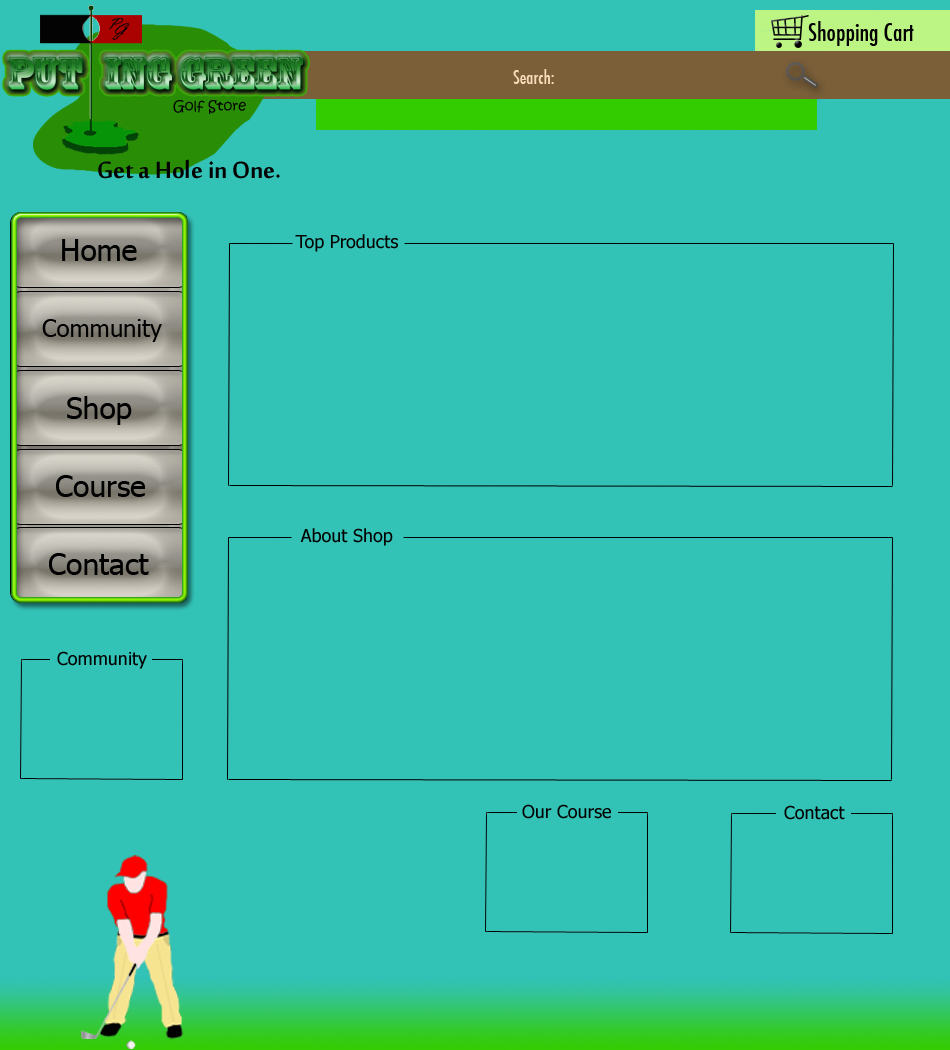
<style>
.page{position:relative;width:950px;height:1050px;background:#32c2b6}
.page>*{position:absolute;margin:0}
.t1{font:18px "Futura-CondensedMedium";color:#f5dbb8}
.t2{font:14px "KristenITC-Regular";color:#030303}
.t3{font:36px "MoolBoran";color:#030303}
.t4{font:30px "Tahoma";color:#000000}
.t5{font:18px "Tahoma";color:#040404}
.t6{font:24px "Tahoma";color:#000000}
.t7{font:18px "Tahoma";color:#020202}
</style>
<div class="page">
<p class="t1" style="left:513px;top:69px;width:41px;height:15px">Search:</p>
<p class="t2" style="left:173px;top:100px;width:73px;height:14px">Golf Store</p>
<p class="t3" style="left:98px;top:159px;width:182px;height:20px">Get a Hole in One.</p>
<p class="t4" style="left:62px;top:239px;width:75px;height:22px">Home</p>
<p class="t5" style="left:295px;top:234px;width:103px;height:18px">Top Products</p>
<p class="t6" style="left:42px;top:319px;width:120px;height:23px">Community</p>
<p class="t4" style="left:67px;top:396px;width:65px;height:29px">Shop</p>
<p class="t4" style="left:56px;top:475px;width:89px;height:22px">Course</p>
<p class="t7" style="left:300px;top:528px;width:93px;height:18px">About Shop</p>
<p class="t4" style="left:49px;top:553px;width:100px;height:22px">Contact</p>
<p class="t7" style="left:57px;top:651px;width:90px;height:18px">Community</p>
<p class="t7" style="left:522px;top:804px;width:89px;height:15px">Our Course</p>
<p class="t7" style="left:784px;top:805px;width:61px;height:15px">Contact</p>
</div>
